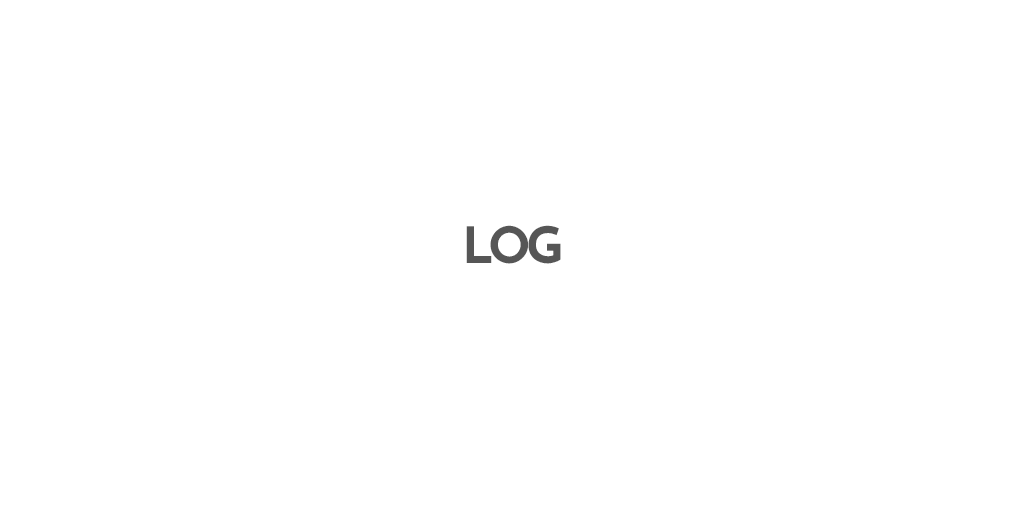
<style>
.page{position:relative;width:1024px;height:512px;background:#ffffff}
.page>*{position:absolute;margin:0}
.t1{font:50px "JosefinSans-Bold";letter-spacing:-0.1em;color:#565656;font-variant:small-caps}
</style>
<div class="page">
<p class="t1" style="left:466px;top:225px;width:95px;height:39px">LOG</p>
</div>
